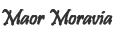
<style>
.page{position:relative;width:120px;height:35px;background:#ffffff}
.page>*{position:absolute;margin:0}
.t1{font:22px "Pristina-Regular";letter-spacing:-0.025em;color:#323232;font-weight:bold}
</style>
<div class="page">
<p class="t1" style="left:2px;top:9px;width:111px;height:17px">Maor Moravia</p>
</div>
